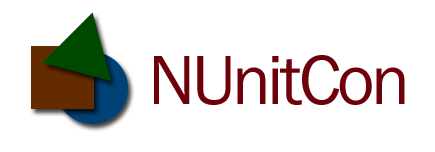
<style>
.page{position:relative;width:435px;height:152px;background:#ffffff}
.page>*{position:absolute;margin:0}
.t1{font:72px "FranklinGothic-Book";letter-spacing:-0.05em;color:#6e000c}
</style>
<div class="page">
<p class="t1" style="left:154px;top:55px;width:251px;height:50px">NUnitCon</p>
</div>
